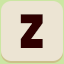
<style>
.page{position:relative;width:64px;height:64px;background:#ece4d3}
.page>*{position:absolute;margin:0}
.t1{font:48px "Generica-Bold";color:#2f0000}
</style>
<div class="page">
<p class="t1" style="left:20px;top:14px;width:23px;height:34px">Z</p>
</div>
